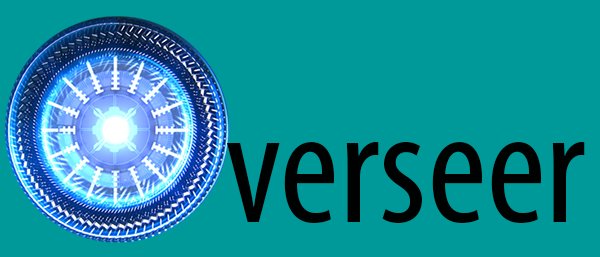
<style>
.page{position:relative;width:600px;height:257px;background:#009999}
.page>*{position:absolute;margin:0}
.t1{font:163.7px "MyriadPro-Cond";color:#000101}
</style>
<div class="page">
<p class="t1" style="left:227px;top:141px;width:358px;height:82px">verseer</p>
</div>
